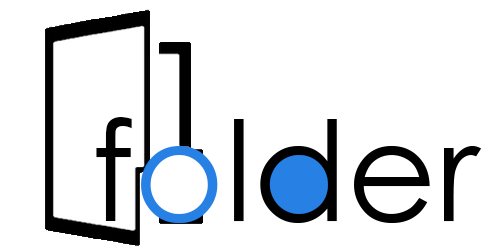
<style>
.page{position:relative;width:500px;height:250px;background:#ffffff}
.page>*{position:absolute;margin:0}
.t1{font:138.2px "CenturyGothic";color:#000000}
.t2{font:138.2px "CenturyGothic";color:#2780e3}
</style>
<div class="page">
<p class="t1" style="left:96px;top:117px;width:386px;height:106px">f<span class="t2">o</span>lder</p>
</div>
